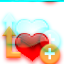
<style>
.page{position:relative;width:64px;height:64px;background:#ffffff}
.page>*{position:absolute;margin:0}
.t1{font:22.7px "Arial-BoldMT";letter-spacing:0.06em;scale:0.89 1}
</style>
<div class="page">
<p class="t1" style="left:44px;top:32px;width:11px;height:12px">+</p>
</div>
